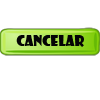
<style>
.page{position:relative;width:100px;height:100px;background:#ffffff}
.page>*{position:absolute;margin:0}
.t1{font:14px "ShowcardGothic-Reg";color:#050505}
</style>
<div class="page">
<p class="t1" style="left:16px;top:35px;width:68px;height:12px">cancelar</p>
</div>
